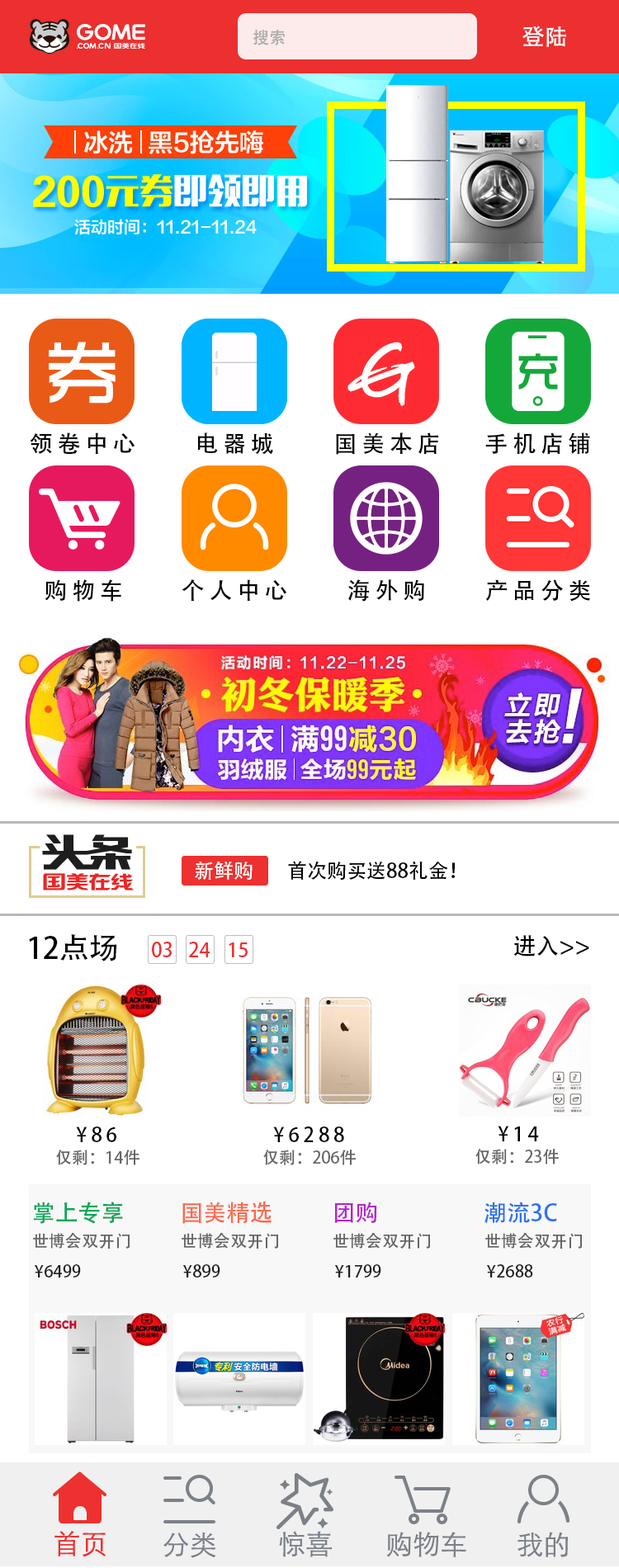
<style>
.page{position:relative;width:619px;height:1568px;background:#ffffff}
.page>*{position:absolute;margin:0}
.t1{font:16.5px "AdobeHeitiStd-Regular";color:#aaaaaa}
.t2{font:23.1px "AdobeHeitiStd-Regular";color:#ffffff}
.t3{font:23.1px "AdobeHeitiStd-Regular";letter-spacing:0.2em;color:#000000}
.t4{font:19.8px "AdobeHeitiStd-Regular";color:#ffffff}
.t5{font:19.8px "AdobeHeitiStd-Regular";color:#000000}
.t6{font:29.7px "AdobeHeitiStd-Regular";color:#000000}
.t7{font:19.8px "AdobeHeitiStd-Regular";color:#ef3030}
.t8{font:23.1px "AdobeHeitiStd-Regular";color:#000000}
.t9{font:19.8px "AdobeHeitiStd-Regular";letter-spacing:0.2em;color:#000000}
.t10{font:16.5px "AdobeHeitiStd-Regular";color:#666666}
.t11{font:23.1px "AdobeHeitiStd-Regular";color:#04a758}
.t12{font:23.1px "AdobeHeitiStd-Regular";color:#ff674a}
.t13{font:23.1px "AdobeHeitiStd-Regular";color:#b124cb}
.t14{font:23.1px "AdobeHeitiStd-Regular";color:#2b71f1}
.t15{font:16.5px "AdobeHeitiStd-Regular";color:#201f1f}
</style>
<div class="page">
<p class="t1" style="left:253px;top:30px;width:32px;height:15px">搜索</p>
<p class="t2" style="left:522px;top:26px;width:44px;height:21px">登陆</p>
<p class="t3" style="left:30px;top:432px;width:105px;height:23px">领卷中心</p>
<p class="t3" style="left:197px;top:432px;width:76px;height:23px">电器城</p>
<p class="t3" style="left:336px;top:432px;width:103px;height:23px">国美本店</p>
<p class="t3" style="left:485px;top:432px;width:105px;height:23px">手机店铺</p>
<p class="t3" style="left:45px;top:579px;width:76px;height:23px">购物车</p>
<p class="t3" style="left:182px;top:579px;width:105px;height:23px">个人中心</p>
<p class="t3" style="left:348px;top:579px;width:76px;height:23px">海外购</p>
<p class="t3" style="left:485px;top:579px;width:105px;height:23px">产品分类</p>
<p class="t4" style="left:195px;top:861px;width:58px;height:19px">新鲜购</p>
<p class="t5" style="left:288px;top:861px;width:168px;height:19px">首次购买送88礼金！</p>
<p class="t6" style="left:29px;top:934px;width:88px;height:27px">12点场</p>
<p class="t7" style="left:152px;top:942px;width:20px;height:15px">03</p>
<p class="t7" style="left:189px;top:942px;width:21px;height:15px">24</p>
<p class="t8" style="left:514px;top:935px;width:75px;height:21px">进入&gt;&gt;</p>
<p class="t7" style="left:229px;top:942px;width:19px;height:15px">15</p>
<p class="t9" style="left:76px;top:1126px;width:40px;height:16px">¥86</p>
<p class="t9" style="left:273px;top:1126px;width:71px;height:16px">¥6288</p>
<p class="t9" style="left:498px;top:1126px;width:41px;height:15px">¥14</p>
<p class="t10" style="left:56px;top:1150px;width:83px;height:15px">仅剩：14件</p>
<p class="t10" style="left:263px;top:1150px;width:93px;height:15px">仅剩：206件</p>
<p class="t10" style="left:475px;top:1149px;width:84px;height:15px">仅剩：23件</p>
<p class="t11" style="left:33px;top:1202px;width:90px;height:22px">掌上专享</p>
<p class="t12" style="left:182px;top:1201px;width:90px;height:23px">国美精选</p>
<p class="t13" style="left:334px;top:1202px;width:43px;height:21px">团购</p>
<p class="t14" style="left:484px;top:1202px;width:73px;height:21px">潮流3C</p>
<p class="t10" style="left:33px;top:1232px;width:97px;height:17px">世博会双开门</p>
<p class="t10" style="left:182px;top:1232px;width:97px;height:17px">世博会双开门</p>
<p class="t10" style="left:333px;top:1232px;width:98px;height:17px">世博会双开门</p>
<p class="t10" style="left:485px;top:1232px;width:98px;height:17px">世博会双开门</p>
<p class="t15" style="left:35px;top:1264px;width:46px;height:14px">¥6499</p>
<p class="t15" style="left:183px;top:1264px;width:37px;height:14px">¥899</p>
<p class="t15" style="left:335px;top:1264px;width:46px;height:14px">¥1799</p>
<p class="t15" style="left:487px;top:1264px;width:46px;height:14px">¥2688</p>
</div>
